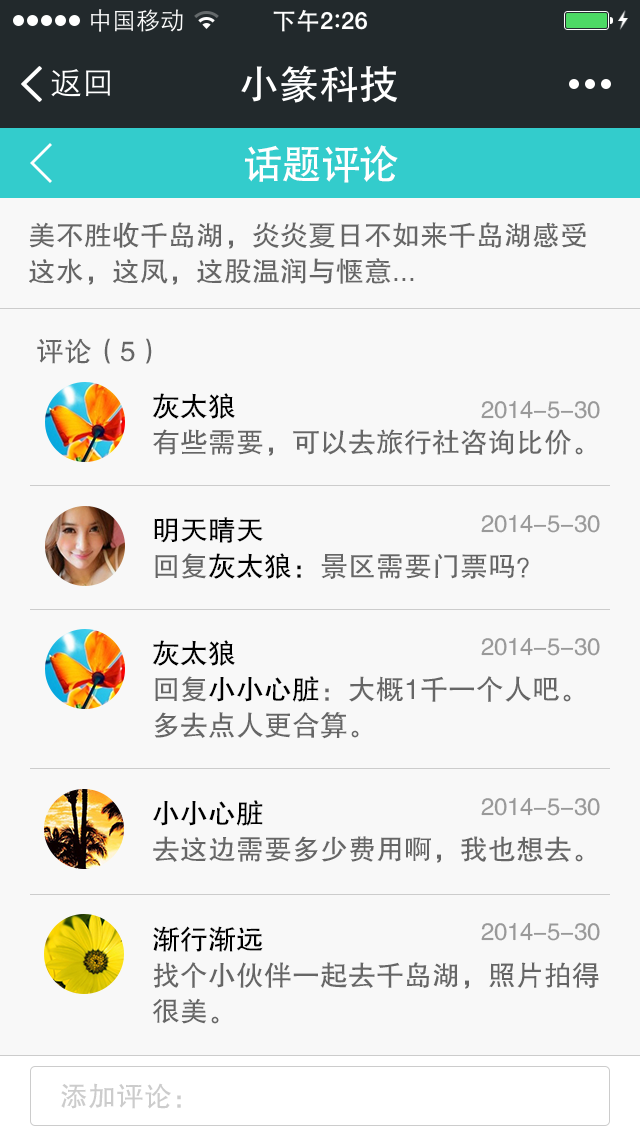
<style>
.page{position:relative;width:640px;height:1136px;background:#f8f8f8}
.page>*{position:absolute;margin:0}
.t1{font:40px "AdobeHeitiStd-Regular";color:#ffffff}
.t2{font:28px/36px "FZHTJW--GB1-0";color:#666666}
.t3{font:28px "FZHTJW--GB1-0";color:#666666}
.t4{font:28px/36px "FZHTJW--GB1-0";color:#000000}
.t5{font:28px/36px "FZHLK--GBK1-0";color:#666666}
.t6{font:24px "FZHTJW--GB1-0";color:#999999}
.t7{font:28px "FZHTJW--GB1-0";color:#cccccc}
</style>
<div class="page">
<p class="t1" style="left:245px;top:145px;width:153px;height:38px">话题评论</p>
<p class="t2" style="left:29px;top:222px;width:558px;height:63px">美不胜收千岛湖，炎炎夏日不如来千岛湖感受<br>这水，这凤，这股温润与惬意...</p>
<p class="t3" style="left:37px;top:338px;width:115px;height:26px">评论（5）</p>
<p class="t2" style="left:152px;top:393px;width:431px;height:63px"><span class="t4">灰太狼<br></span>有些需要，可以去旅行社咨询比价<span class="t5">。</span></p>
<p class="t6" style="left:481px;top:400px;width:119px;height:19px">2014-5-30</p>
<p class="t2" style="left:154px;top:517px;width:375px;height:62px"><span class="t4">明天晴天                           <br></span>回复<span class="t4">灰太狼：</span>景区需要门票吗？</p>
<p class="t6" style="left:481px;top:514px;width:119px;height:19px">2014-5-30</p>
<p class="t2" style="left:152px;top:640px;width:419px;height:99px"><span class="t4">灰太狼</span><br>回复<span class="t4">小小心脏</span>：大概1千一个人吧<span class="t5">。<br></span>多去点人更合算<span class="t5">。</span></p>
<p class="t6" style="left:481px;top:637px;width:119px;height:19px">2014-5-30</p>
<p class="t6" style="left:481px;top:797px;width:119px;height:19px">2014-5-30</p>
<p class="t2" style="left:153px;top:800px;width:430px;height:63px"><span class="t4">小小心脏</span><br>去这边需要多少费用啊，我也想去<span class="t5">。</span></p>
<p class="t2" style="left:152px;top:926px;width:447px;height:98px"><span class="t4">渐行渐远<br></span>找个小伙伴一起去千岛湖，照片拍得<br>很美<span class="t5">。</span></p>
<p class="t6" style="left:481px;top:922px;width:119px;height:19px">2014-5-30</p>
<p class="t7" style="left:61px;top:1083px;width:120px;height:26px">添加评论：</p>
</div>
